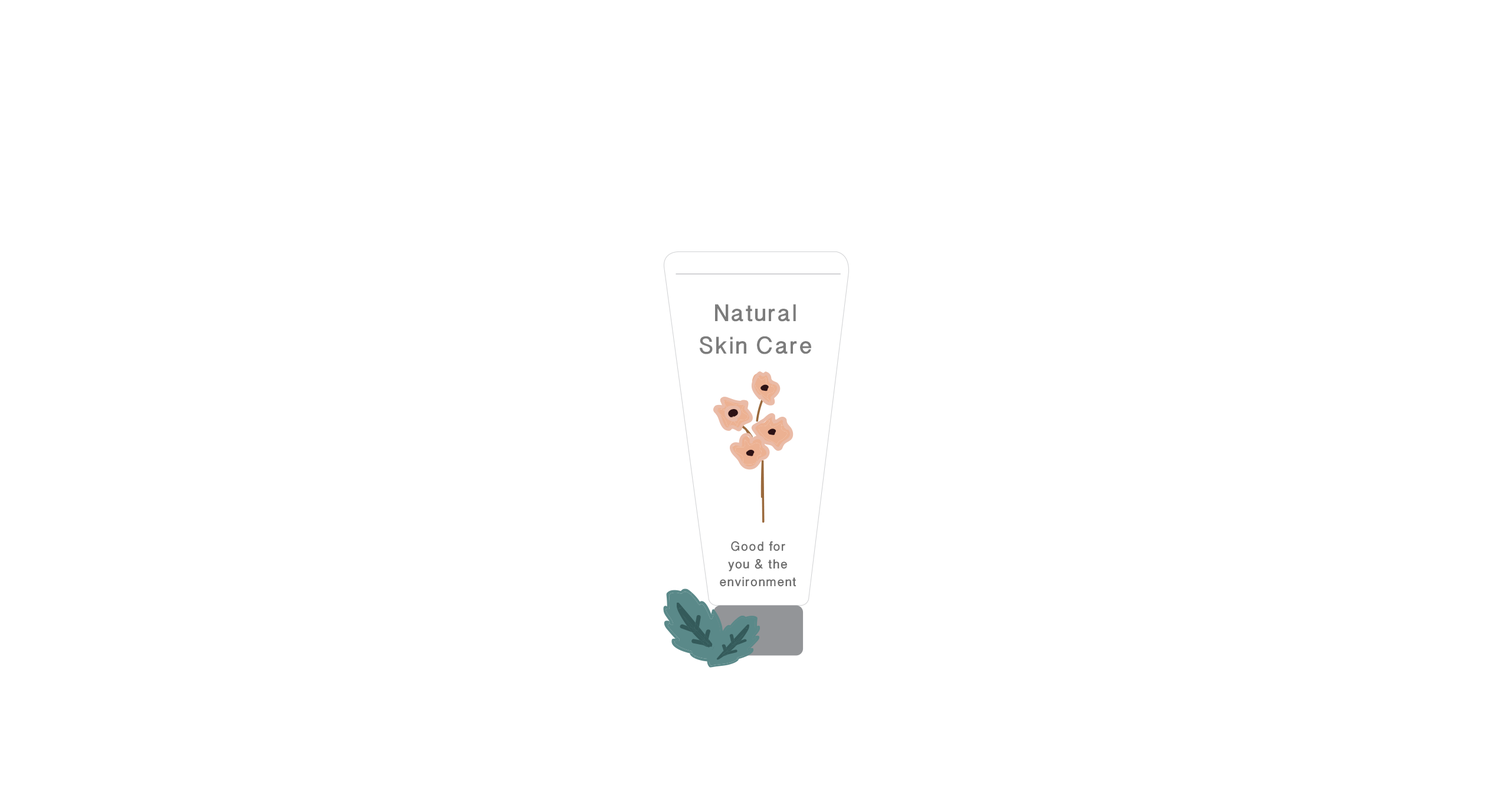
<style>
.page{position:relative;width:1508px;height:791px;background:#ffffff}
.page>*{position:absolute;margin:0}
.t1{font:27px "OriyaSangamMN-Bold";letter-spacing:0.05em;color:#7c7c7c}
.t2{font:14.8px "OriyaSangamMN-Bold";letter-spacing:0.05em;color:#6c6c6c}
</style>
<div class="page">
<p class="t1" style="left:700px;top:304px;width:111px;height:50px;text-align:center">Natural<br>Skin Care</p>
<p class="t2" style="left:720px;top:541px;width:76px;height:46px;text-align:center">Good for <br>you &amp; the <br>environment</p>
</div>
